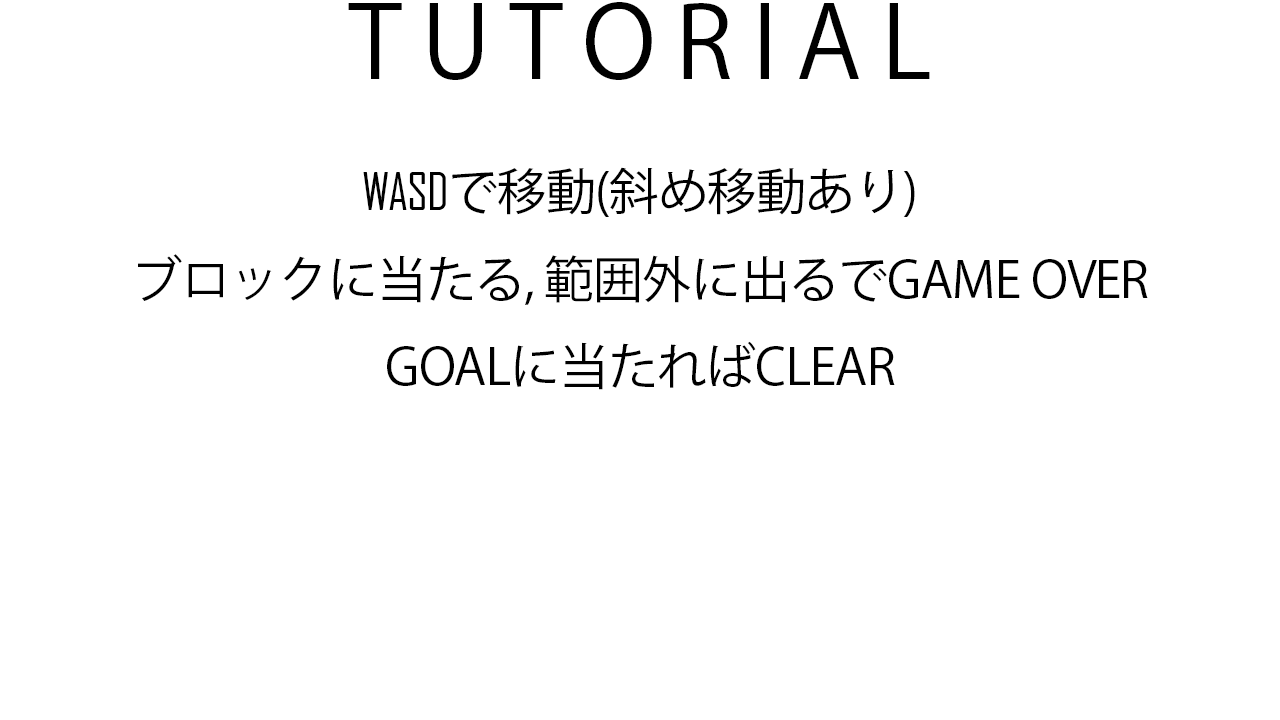
<style>
.page{position:relative;width:1280px;height:720px;background:#ffffff}
.page>*{position:absolute;margin:0}
.t1{font:12px "KozGoPr6N-Regular";letter-spacing:-0.02em;color:#000000}
.t2{font:100px "KozGoPr6N-Regular";letter-spacing:-0.02em;color:#000000}
.t3{font:12px "AgencyFB-Reg";letter-spacing:-0.02em;color:#000000}
</style>
<div class="page">
<p class="t1" style="left:138px;top:2px;width:1010px;height:388px;text-align:center"><span class="t2">T U T O R I A L<br></span><span class="t3">WASD</span>で移動(斜め移動あり)<br>ブロックに当たる, 範囲外に出るでGAME OVER<br>GOALに当たればCLEAR</p>
</div>
